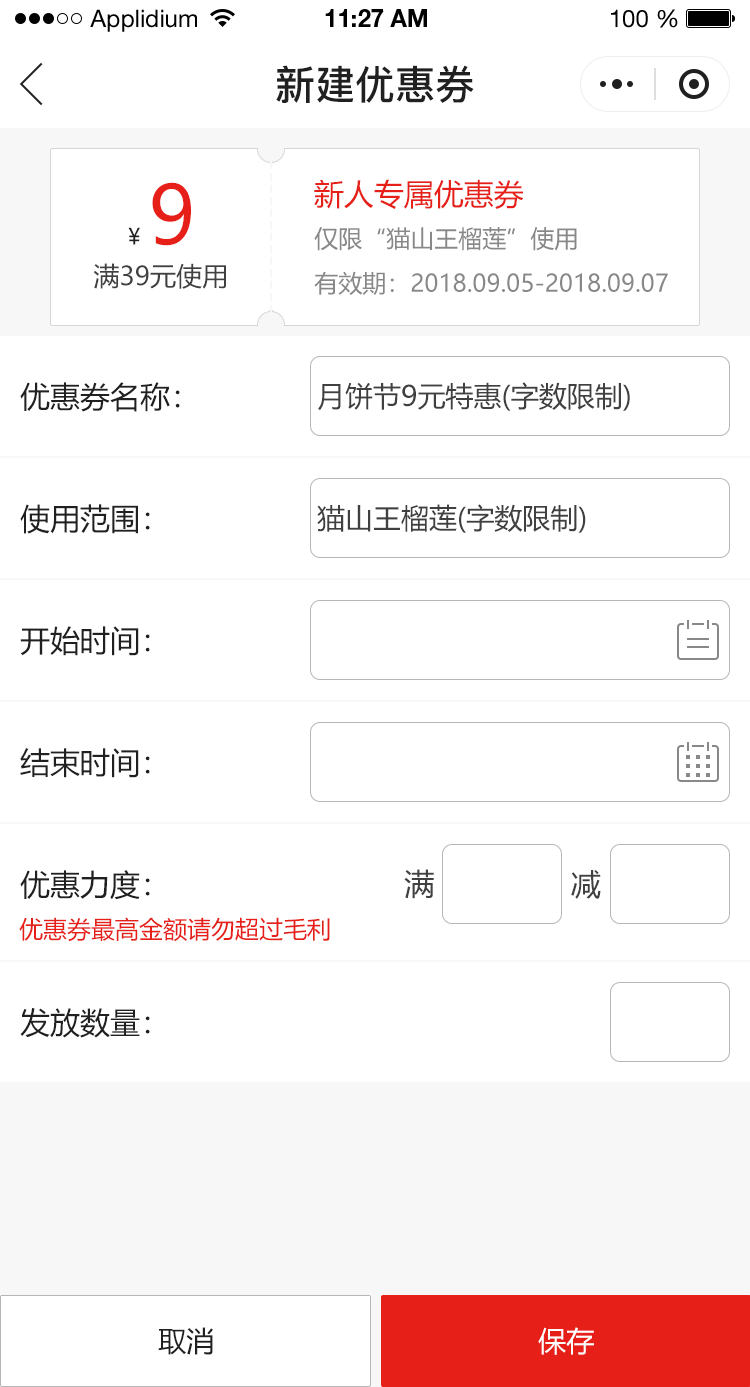
<style>
.page{position:relative;width:750px;height:1387px;background:#ffffff}
.page>*{position:absolute;margin:0}
.t1{font:24px "HelveticaNeueLTStd-Roman";color:#000000}
.t2{font:24px "HelveticaNeueLTStd-Bd";color:#000000}
.t3{font:40px "PingFang-SC-Bold";color:#202020;text-transform:uppercase}
.t4{font:80px "MicrosoftYaHei";color:#e61f18;text-transform:uppercase}
.t5{font:30px "MicrosoftYaHei";color:#e61f18;text-transform:uppercase}
.t6{font:22px "MicrosoftYaHei";color:#202020;text-transform:uppercase}
.t7{font:24px "MicrosoftYaHei";color:#888888;text-transform:uppercase}
.t8{font:26px "MicrosoftYaHei";color:#404040;text-transform:uppercase}
.t9{font:30px "MicrosoftYaHei";color:#202020;text-transform:uppercase}
.t10{font:28px "MicrosoftYaHei";color:#404040;text-transform:uppercase}
.t11{font:30px "MicrosoftYaHei";color:#404040;text-transform:uppercase}
.t12{font:24px "MicrosoftYaHei";color:#e61f18;text-transform:uppercase}
.t13{font:28px "MicrosoftYaHei";color:#202020;text-transform:uppercase}
.t14{font:28px "MicrosoftYaHei";color:#ffffff;text-transform:uppercase}
</style>
<div class="page">
<p class="t1" style="left:90px;top:9px;width:107px;height:23px">Applidium</p>
<p class="t2" style="left:325px;top:9px;width:102px;height:18px">11:27 AM</p>
<p class="t1" style="left:611px;top:9px;width:67px;height:19px">100 %</p>
<p class="t3" style="left:276px;top:65px;width:198px;height:38px">新建优惠券</p>
<p class="t4" style="left:152px;top:182px;width:39px;height:64px">9</p>
<p class="t5" style="left:314px;top:179px;width:210px;height:30px">新人专属优惠券</p>
<p class="t6" style="left:128px;top:227px;width:12px;height:18px">¥</p>
<p class="t7" style="left:314px;top:227px;width:263px;height:24px">仅限“猫山王榴莲”使用</p>
<p class="t8" style="left:93px;top:263px;width:133px;height:26px">满39元使用</p>
<p class="t7" style="left:314px;top:271px;width:354px;height:24px">有效期：2018.09.05-2018.09.07</p>
<p class="t9" style="left:20px;top:382px;width:160px;height:30px">优惠券名称：</p>
<p class="t10" style="left:318px;top:382px;width:312px;height:29px">月饼节9元特惠(字数限制)</p>
<p class="t9" style="left:20px;top:504px;width:130px;height:30px">使用范围：</p>
<p class="t10" style="left:317px;top:504px;width:269px;height:29px">猫山王榴莲(字数限制)</p>
<p class="t9" style="left:20px;top:626px;width:130px;height:30px">开始时间：</p>
<p class="t9" style="left:20px;top:748px;width:130px;height:30px">结束时间：</p>
<p class="t9" style="left:20px;top:870px;width:130px;height:30px">优惠力度：</p>
<p class="t11" style="left:404px;top:869px;width:30px;height:30px">满</p>
<p class="t11" style="left:571px;top:870px;width:30px;height:29px">减</p>
<p class="t12" style="left:19px;top:917px;width:311px;height:25px">优惠券最高金额请勿超过毛利</p>
<p class="t9" style="left:20px;top:1008px;width:130px;height:30px">发放数量：</p>
<p class="t13" style="left:158px;top:1327px;width:55px;height:28px">取消</p>
<p class="t14" style="left:538px;top:1327px;width:56px;height:28px">保存</p>
</div>
